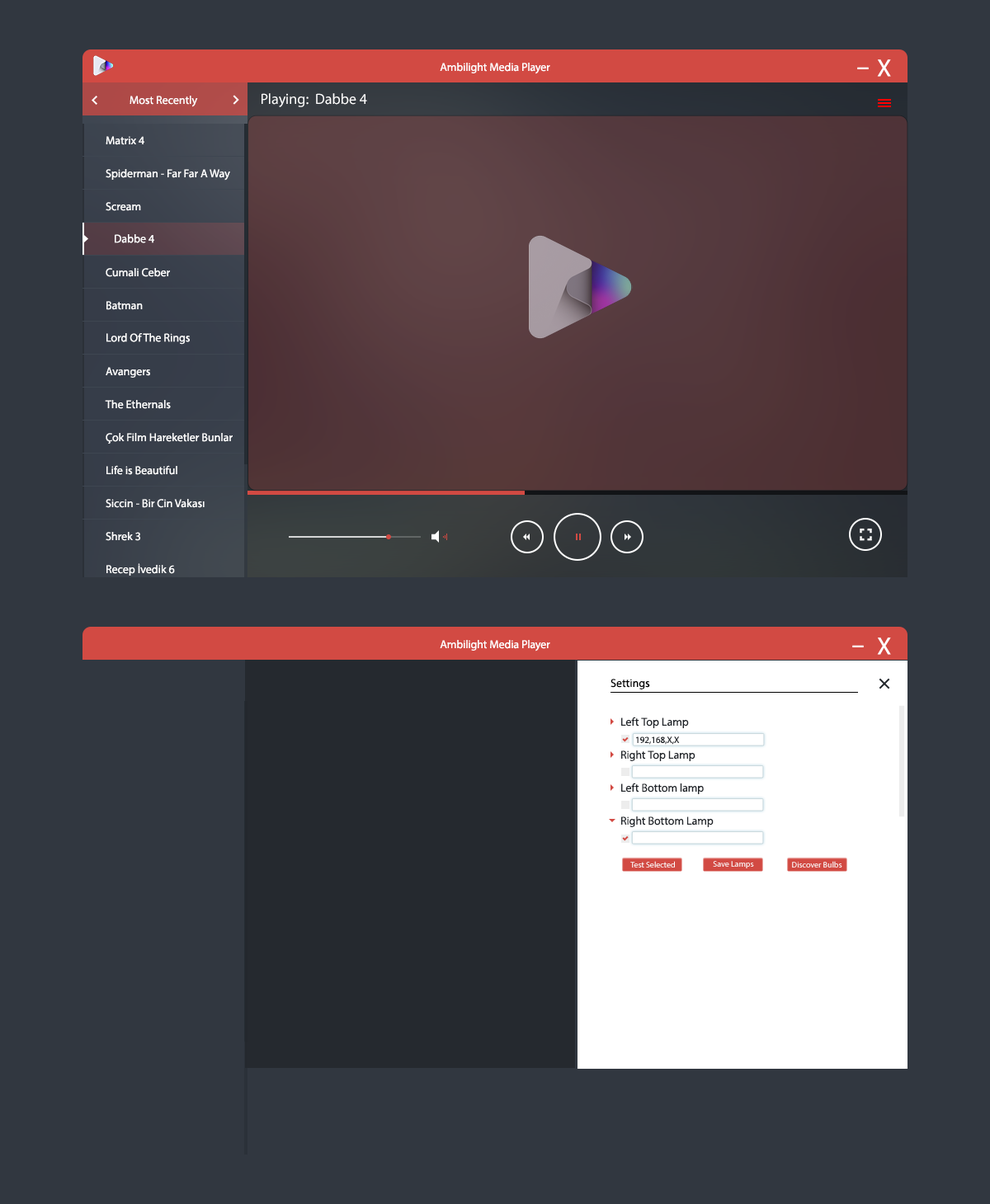
<style>
.page{position:relative;width:990px;height:1204px;background:#313740}
.page>*{position:absolute;margin:0}
.t1{font:11.5px "MyriadPro-Regular";color:#ffffff}
.t2{font:24.7px "MyriadPro-Regular";color:#ffffff}
.t3{font:14.8px "MyriadPro-Regular";color:#ffffff}
.t4{font:11.5px "MyriadPro-Regular";color:#000000}
.t5{font:11.5px "MyriadPro-Regular";color:#22262b}
.t6{font:9.1px "MyriadPro-Regular";color:#22262b}
.t7{font:8.2px "MyriadPro-Regular";color:#ffffff}
</style>
<div class="page">
<p class="t1" style="left:440px;top:63px;width:110px;height:11px">Ambilight Media Player</p>
<p class="t2" style="left:877px;top:59px;width:14px;height:18px">X</p>
<p class="t2" style="left:857px;top:67px;width:12px;height:2px">-</p>
<p class="t1" style="left:130px;top:96px;width:68px;height:11px">Most Recently</p>
<p class="t3" style="left:262px;top:93px;width:105px;height:14px">Playing:  Dabbe 4</p>
<p class="t1" style="left:106px;top:136px;width:38px;height:9px">Matrix 4</p>
<p class="t1" style="left:106px;top:169px;width:124px;height:12px">Spiderman - Far Far A Way</p>
<p class="t1" style="left:106px;top:202px;width:35px;height:9px">Scream</p>
<p class="t1" style="left:115px;top:234px;width:39px;height:9px">Dabbe 4</p>
<p class="t1" style="left:106px;top:268px;width:64px;height:9px">Cumali Ceber</p>
<p class="t1" style="left:106px;top:301px;width:37px;height:9px">Batman</p>
<p class="t1" style="left:106px;top:333px;width:84px;height:12px">Lord Of The Rings</p>
<p class="t1" style="left:106px;top:367px;width:44px;height:11px">Avangers</p>
<p class="t1" style="left:105px;top:400px;width:66px;height:9px">The Ethernals</p>
<p class="t1" style="left:106px;top:433px;width:127px;height:11px">Çok Film Hareketler Bunlar</p>
<p class="t1" style="left:106px;top:465px;width:71px;height:10px">Life is Beautiful</p>
<p class="t1" style="left:106px;top:499px;width:99px;height:9px">Siccin - Bir Cin Vakası</p>
<p class="t1" style="left:106px;top:532px;width:34px;height:9px">Shrek 3</p>
<p class="t1" style="left:106px;top:563px;width:69px;height:13px">Recep İvedik 6</p>
<p class="t1" style="left:440px;top:640px;width:110px;height:12px">Ambilight Media Player</p>
<p class="t2" style="left:877px;top:638px;width:14px;height:17px">X</p>
<p class="t2" style="left:852px;top:645px;width:12px;height:3px">-</p>
<p class="t4" style="left:610px;top:679px;width:40px;height:11px">Settings</p>
<p class="t5" style="left:621px;top:717px;width:68px;height:11px">Left Top Lamp</p>
<p class="t6" style="left:636px;top:737px;width:44px;height:8px">192,168,X,X</p>
<p class="t5" style="left:621px;top:751px;width:74px;height:10px">Right Top Lamp</p>
<p class="t5" style="left:621px;top:783px;width:83px;height:11px">Left Bottom lamp</p>
<p class="t5" style="left:621px;top:817px;width:93px;height:10px">Right Bottom Lamp</p>
<p class="t7" style="left:630px;top:861px;width:45px;height:7px">Test Selected</p>
<p class="t7" style="left:713px;top:861px;width:41px;height:8px">Save Lamps</p>
<p class="t7" style="left:792px;top:861px;width:50px;height:7px">Discover Bulbs</p>
</div>
